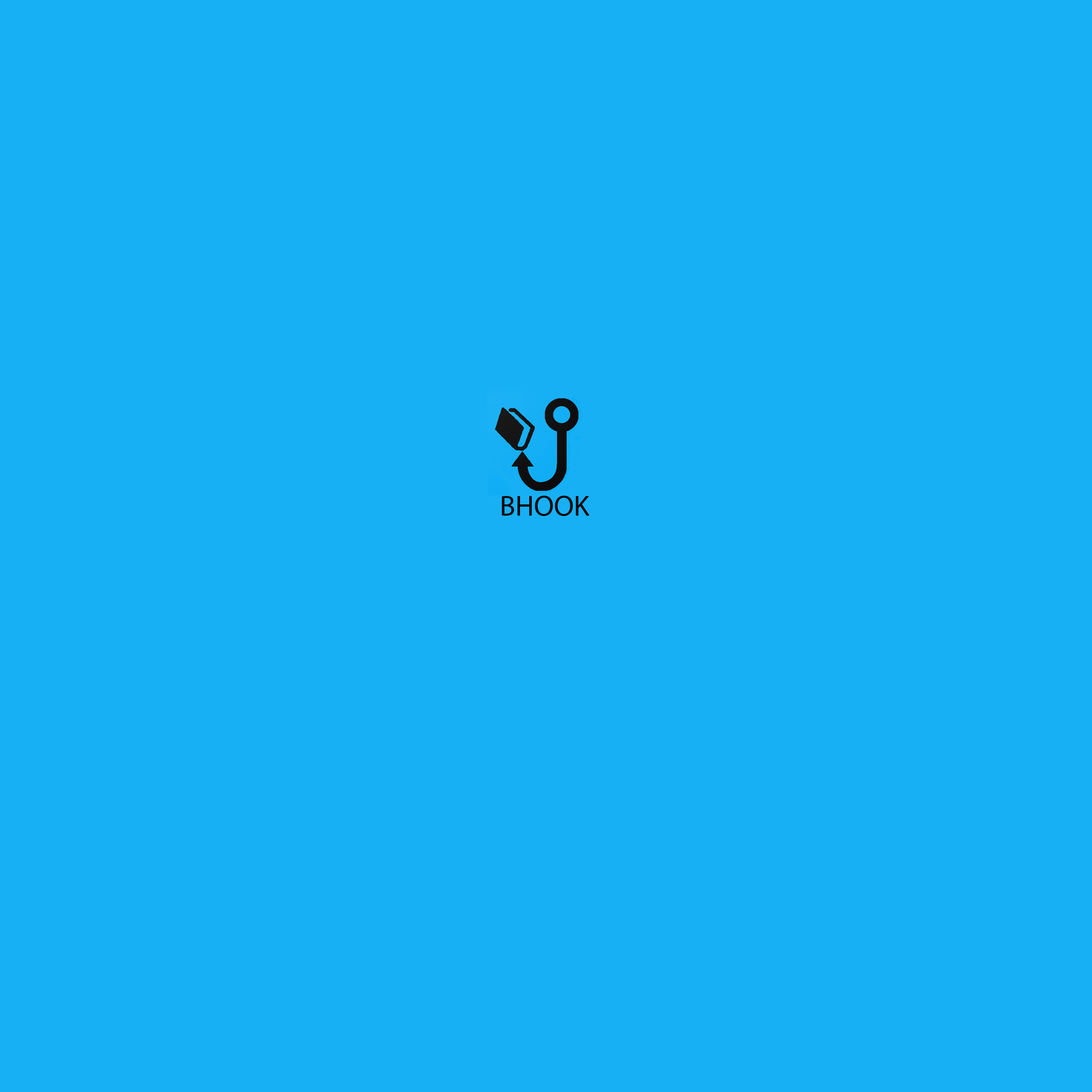
<style>
.page{position:relative;width:1092px;height:1092px;background:#18b0f5}
.page>*{position:absolute;margin:0}
.t1{font:28.8px "MyriadPro-Regular";color:#000000}
</style>
<div class="page">
<p class="t1" style="left:502px;top:496px;width:88px;height:20px">BHOOK</p>
</div>
